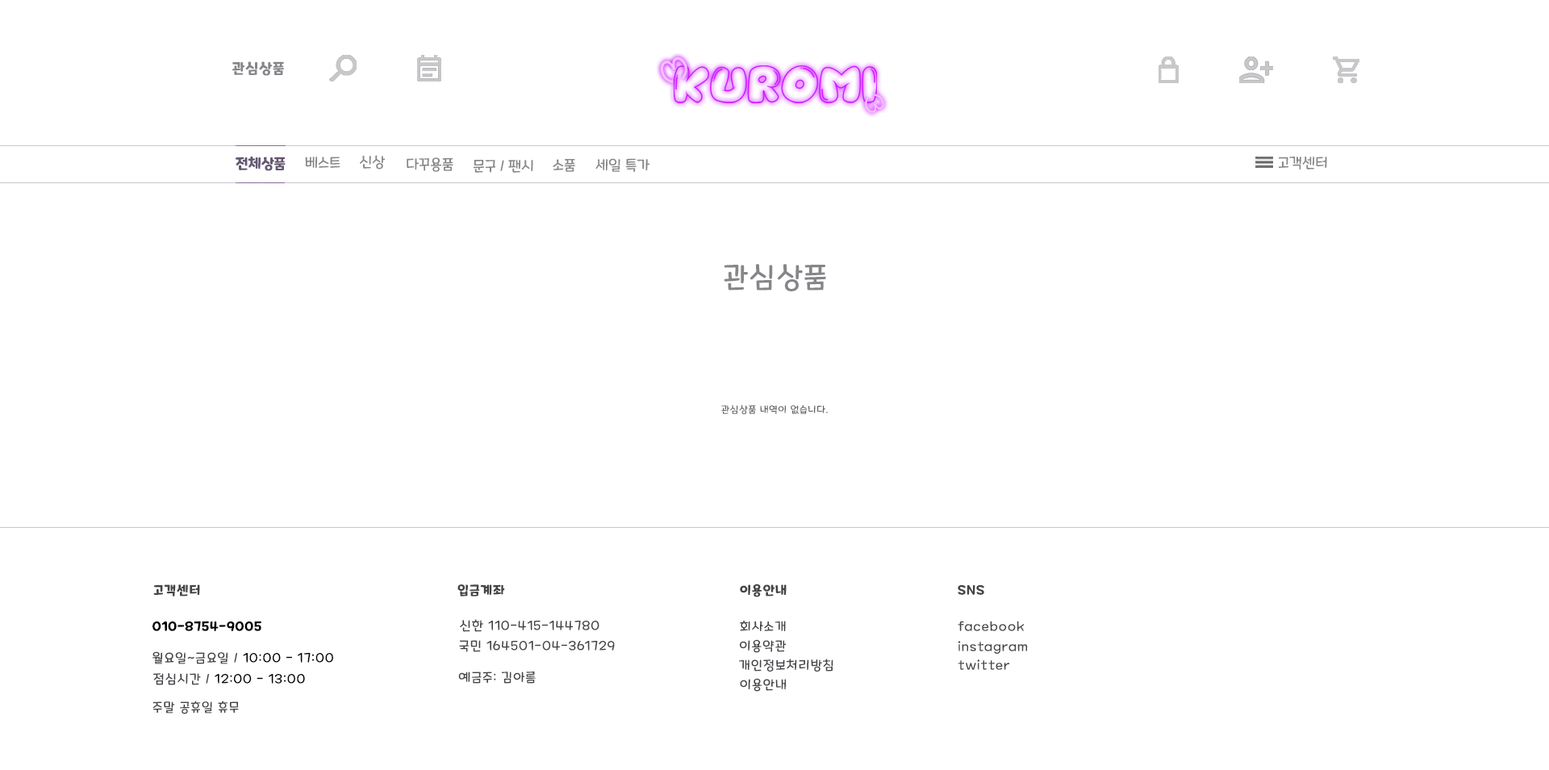
<style>
.page{position:relative;width:1549px;height:770px;background:#ffffff}
.page>*{position:absolute;margin:0}
.t1{font:14.5px "MaplestoryBold";letter-spacing:0.06em;color:#878589}
.t2{font:14.5px "MaplestoryBold";color:#645772}
.t3{font:14.5px "MaplestoryLight";color:#878589}
.t4{font:29px "MaplestoryLight";letter-spacing:0.06em;color:#878589}
.t5{font:9.7px "MaplestoryLight";letter-spacing:0.06em;color:#646165}
.t6{font:12.9px "MaplestoryBold";letter-spacing:0.06em;color:#464348}
.t7{font:12.9px "MaplestoryBold";letter-spacing:0.06em;color:#000000}
.t8{font:12.9px "MaplestoryLight";letter-spacing:0.06em;color:#464348}
.t9{font:12.9px "MaplestoryLight";letter-spacing:0.06em;color:#000000}
</style>
<div class="page">
<p class="t1" style="left:232px;top:61px;width:52px;height:15px">관심상품</p>
<p class="t2" style="left:236px;top:157px;width:50px;height:14px">전체상품</p>
<p class="t3" style="left:305px;top:157px;width:35px;height:12px">베스트</p>
<p class="t3" style="left:360px;top:155px;width:25px;height:14px">신상</p>
<p class="t3" style="left:407px;top:157px;width:46px;height:15px">다꾸용품</p>
<p class="t3" style="left:474px;top:160px;width:59px;height:13px">문구 / 팬시</p>
<p class="t3" style="left:553px;top:159px;width:22px;height:13px">소품</p>
<p class="t3" style="left:595px;top:158px;width:55px;height:14px">세일 특가</p>
<p class="t3" style="left:1279px;top:157px;width:48px;height:12px">고객센터</p>
<p class="t4" style="left:724px;top:264px;width:102px;height:27px">관심상품</p>
<p class="t5" style="left:721px;top:405px;width:107px;height:10px">관심상품 내역이 없습니다.</p>
<p class="t6" style="left:153px;top:584px;width:47px;height:12px">고객센터</p>
<p class="t6" style="left:457px;top:584px;width:48px;height:12px">입금계좌</p>
<p class="t6" style="left:740px;top:583px;width:47px;height:14px">이용안내</p>
<p class="t6" style="left:958px;top:585px;width:26px;height:10px">SNS</p>
<p class="t7" style="left:152px;top:620px;width:109px;height:11px">010-8754-9005</p>
<p class="t8" style="left:460px;top:619px;width:139px;height:13px">신한 110-415-144780</p>
<p class="t8" style="left:740px;top:620px;width:46px;height:11px">회사소개</p>
<p class="t8" style="left:958px;top:620px;width:67px;height:11px">facebook</p>
<p class="t8" style="left:459px;top:640px;width:156px;height:12px">국민 164501-04-361729</p>
<p class="t8" style="left:740px;top:639px;width:47px;height:14px">이용약관</p>
<p class="t8" style="left:958px;top:641px;width:70px;height:13px">instagram</p>
<p class="t9" style="left:152px;top:651px;width:181px;height:13px"><span class="t8">월요일~금요일 / </span>10:00 - 17:00</p>
<p class="t8" style="left:739px;top:658px;width:94px;height:13px">개인정보처리방침</p>
<p class="t8" style="left:958px;top:659px;width:52px;height:11px">twitter</p>
<p class="t9" style="left:153px;top:673px;width:152px;height:12px"><span class="t8">점심시간 / </span>12:00 - 13:00</p>
<p class="t8" style="left:458px;top:671px;width:78px;height:12px">예금주: 김아름</p>
<p class="t8" style="left:740px;top:678px;width:46px;height:13px">이용안내</p>
<p class="t8" style="left:152px;top:700px;width:87px;height:14px">주말 공휴일 휴무</p>
</div>
